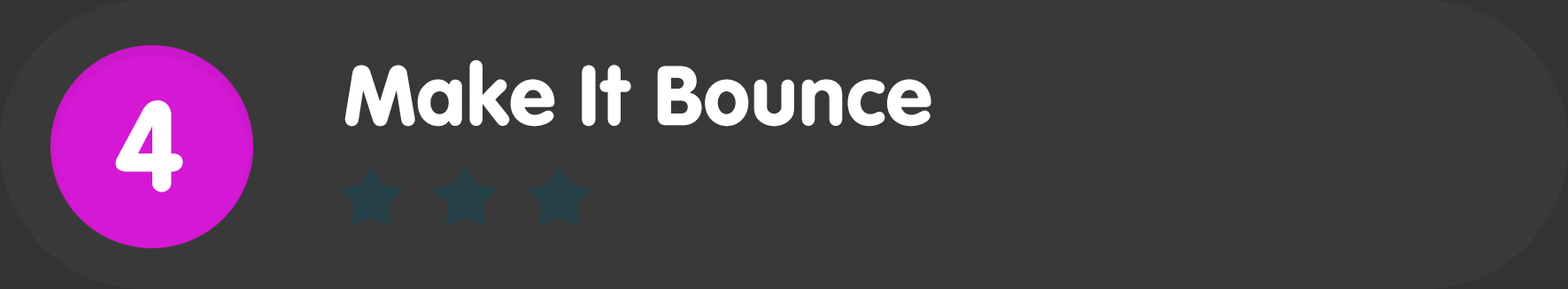
<style>
.page{position:relative;width:1568px;height:289px;background:#393939}
.page>*{position:absolute;margin:0}
.t1{font:88.5px "VAGRundschriftD";color:#ffffff}
.t2{font:132.8px "VAGRundschriftD";color:#ffffff}
</style>
<div class="page">
<p class="t1" style="left:344px;top:59px;width:587px;height:68px">Make It Bounce</p>
<p class="t2" style="left:115px;top:100px;width:68px;height:92px">4</p>
</div>
